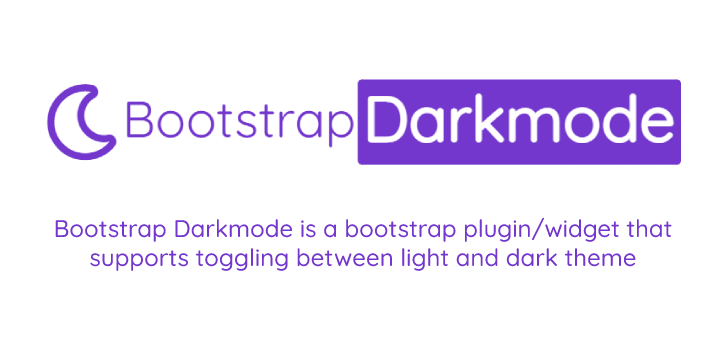
<style>
.page{position:relative;width:728px;height:364px;background:#ffffff}
.page>*{position:absolute;margin:0}
.t1{font:24px "Quicksand-Medium";color:#7337cd}
</style>
<div class="page">
<p class="t1" style="left:55px;top:217px;width:617px;height:54px;text-align:center">Bootstrap Darkmode is a bootstrap plugin/widget that supports toggling between light and dark theme</p>
</div>
